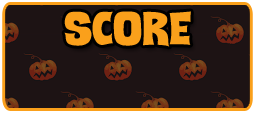
<style>
.page{position:relative;width:255px;height:113px;background:#1d1314}
.page>*{position:absolute;margin:0}
.t1{font:47.8px "SCARYAndSPICYRegular";color:#faa01b}
</style>
<div class="page">
<p class="t1" style="left:64px;top:11px;width:127px;height:36px">SCORE</p>
</div>
